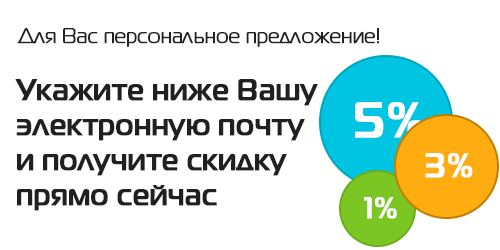
<style>
.page{position:relative;width:500px;height:250px;background:#ffffff}
.page>*{position:absolute;margin:0}
.t1{font:20.8px "MagistralC";color:#212121;font-weight:bold}
.t2{font:29.2px "MagistralC-Bold";color:#202020;font-weight:bold}
.t3{font:50px "MagistralC-Bold";color:#ffffff;font-weight:bold}
.t4{font:33.3px "MagistralC-Bold";color:#ffffff;font-weight:bold}
.t5{font:29.2px "MagistralC-Bold";color:#ffffff;font-weight:bold}
</style>
<div class="page">
<p class="t1" style="left:17px;top:28px;width:362px;height:19px">Для Вас перcональное предложение!</p>
<p class="t2" style="left:15px;top:79px;width:303px;height:132px">Укажите ниже Вашу <br>электронную почту <br>и получите скидку <br>прямо сейчас</p>
<p class="t3" style="left:355px;top:102px;width:70px;height:36px">5%</p>
<p class="t4" style="left:425px;top:153px;width:48px;height:25px">3%</p>
<p class="t5" style="left:364px;top:197px;width:33px;height:22px">1%</p>
</div>
